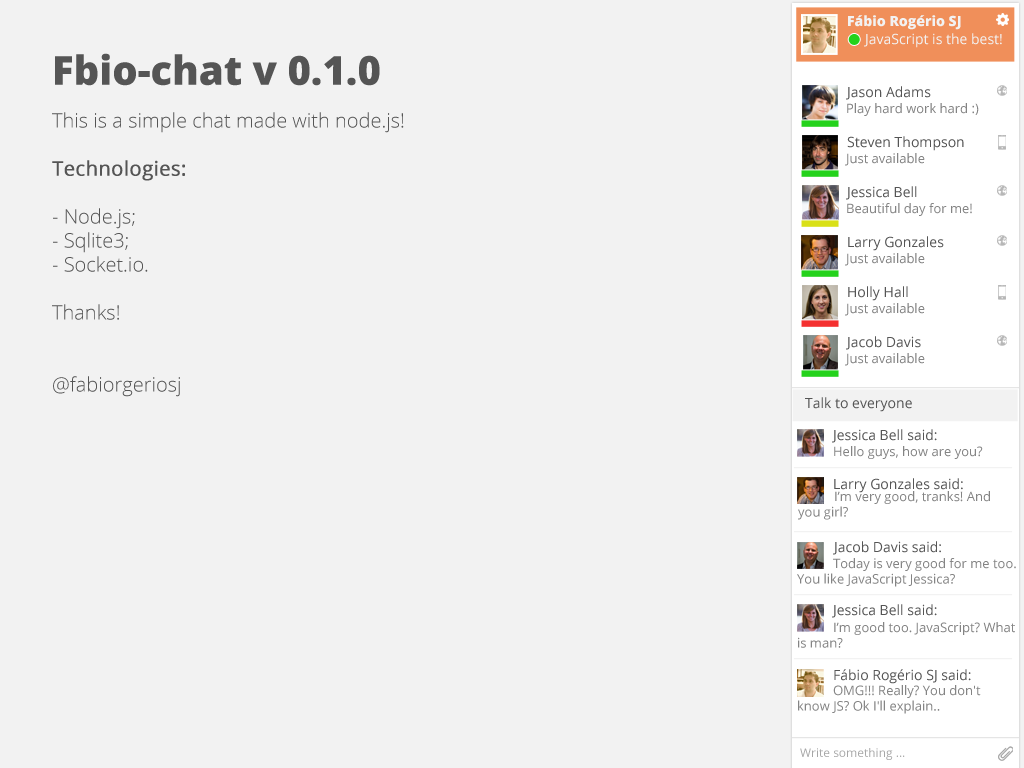
<style>
.page{position:relative;width:1024px;height:768px;background:#f2f2f2}
.page>*{position:absolute;margin:0}
.t1{font:14px "OpenSans-Extrabold";color:#f2f2f2}
.t2{font:14px "OpenSans";color:#f2f2f2}
.t3{font:40px "OpenSans-Extrabold";color:#555555}
.t4{font:14px "OpenSans";color:#555555}
.t5{font:20px "OpenSans-Light";color:#555555}
.t6{font:20px "OpenSans";color:#555555;font-weight:bold}
.t7{font:13px "OpenSans";color:#848484}
.t8{font:12px "OpenSans";color:#a7a7a7}
</style>
<div class="page">
<p class="t1" style="left:848px;top:15px;width:113px;height:15px">Fábio Rogério SJ</p>
<p class="t2" style="left:864px;top:33px;width:138px;height:15px">JavaScript is the best!</p>
<p class="t3" style="left:55px;top:53px;width:325px;height:33px">Fbio-chat v 0.1.0</p>
<p class="t4" style="left:846px;top:86px;width:85px;height:14px">Jason Adams</p>
<p class="t5" style="left:52px;top:112px;width:352px;height:285px">This is a simple chat made with node.js!<br><br><span class="t6">Technologies:<br></span><br>- Node.js;<br>- Sqlite3;<br>- Socket.io.<br><br>Thanks!<br><br><br>@fabiorgeriosj</p>
<p class="t7" style="left:847px;top:103px;width:132px;height:13px">Play hard work hard :)</p>
<p class="t4" style="left:847px;top:136px;width:117px;height:15px">Steven Thompson</p>
<p class="t7" style="left:845px;top:153px;width:80px;height:13px">Just available</p>
<p class="t4" style="left:846px;top:186px;width:71px;height:14px">Jessica Bell</p>
<p class="t7" style="left:847px;top:203px;width:125px;height:13px">Beautiful day for me!</p>
<p class="t4" style="left:848px;top:236px;width:96px;height:15px">Larry Gonzales</p>
<p class="t7" style="left:845px;top:253px;width:80px;height:13px">Just available</p>
<p class="t4" style="left:848px;top:286px;width:60px;height:15px">Holly Hall</p>
<p class="t7" style="left:845px;top:303px;width:80px;height:13px">Just available</p>
<p class="t4" style="left:846px;top:336px;width:75px;height:14px">Jacob Davis</p>
<p class="t7" style="left:845px;top:353px;width:80px;height:13px">Just available</p>
<p class="t4" style="left:805px;top:397px;width:107px;height:15px">Talk to everyone</p>
<p class="t4" style="left:832px;top:429px;width:105px;height:14px">Jessica Bell said:</p>
<p class="t7" style="left:834px;top:446px;width:149px;height:13px">Hello guys, how are you?</p>
<p class="t4" style="left:834px;top:478px;width:129px;height:15px">Larry Gonzales said:</p>
<p class="t7" style="left:798px;top:491px;width:192px;height:29px">I’m very good, tranks! And<br>you girl?</p>
<p class="t4" style="left:833px;top:541px;width:108px;height:14px">Jacob Davis said:</p>
<p class="t7" style="left:797px;top:558px;width:219px;height:29px">Today is very good for me too.<br>You like JavaScript Jessica?</p>
<p class="t4" style="left:832px;top:604px;width:105px;height:14px">Jessica Bell said:</p>
<p class="t7" style="left:798px;top:622px;width:217px;height:26px">I’m good too. JavaScript? What<br>is man?</p>
<p class="t4" style="left:834px;top:669px;width:137px;height:15px">Fábio Rogério SJ said:</p>
<p class="t7" style="left:798px;top:685px;width:183px;height:29px">OMG!!! Really? You don't <br>know JS? Ok I'll explain..</p>
<p class="t8" style="left:800px;top:748px;width:105px;height:12px">Write something ...</p>
</div>
